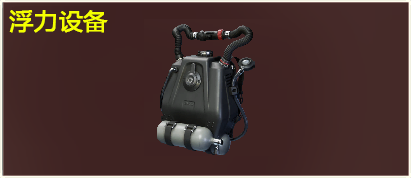
<style>
.page{position:relative;width:411px;height:178px}
.page>*{position:absolute;margin:0}
.t1{font:24px "MicrosoftYaHei";color:#f4ff00;font-weight:bold}
</style>
<div class="page">
<p class="t1" style="left:9px;top:10px;width:99px;height:23px">浮力设备</p>
</div>
